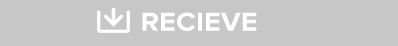
<style>
.page{position:relative;width:398px;height:46px;background:#c7c7c7}
.page>*{position:absolute;margin:0}
.t1{font:27px "ProximaNova-Bold";color:#ffffff;scale:1.07 1}
</style>
<div class="page">
<p class="t1" style="left:142px;top:12px;width:115px;height:19px">RECIEVE</p>
</div>
